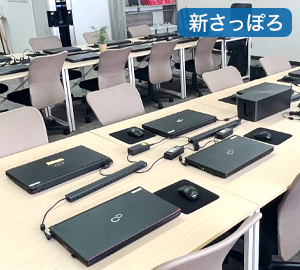
<style>
.page{position:relative;width:300px;height:270px}
.page>*{position:absolute;margin:0}
.t1{font:20px "HiraKakuStd-W5";letter-spacing:-0.05em;color:#ffffff}
</style>
<div class="page">
<p class="t1" style="left:189px;top:13px;width:93px;height:19px">新さっぽろ</p>
</div>
